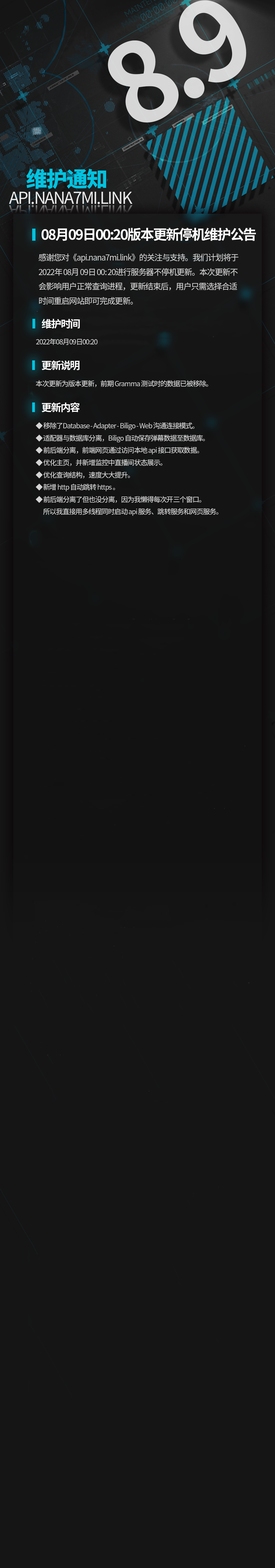
<style>
.page{position:relative;width:275px;height:1568px;background:#151515}
.page>*{position:absolute;margin:0}
.t1{font:110px "SourceHanSansSC-Bold";letter-spacing:-0.075em;color:#d7d7d7}
.t2{font:13.9px "SourceHanSansSC-Bold";letter-spacing:-0.075em;color:#fefefe}
.t3{font:8.3px "SourceHanSansSC-Regular";letter-spacing:-0.075em;color:#d4d4d4}
.t4{font:10.3px "SourceHanSansSC-Bold";letter-spacing:-0.075em;color:#fefefe}
.t5{font:7px "SourceHanSansSC-Regular";letter-spacing:-0.075em;color:#d4d4d4}
</style>
<div class="page">
<p class="t1" style="left:108px;top:0px;width:138px;height:123px;rotate:-30deg">8.9</p>
<p class="t2" style="left:42px;top:227px;width:214px;height:14px">08月09日00:20版本更新停机维护公告</p>
<p class="t3" style="left:39px;top:253px;width:200px;height:52px">感谢您对《api.nana7mi.link》的关注与支持。我们计划将于<br>2022年 08月 09日 00: 20进行服务器不停机更新。本次更新不<br>会影响用户正常查询进程，更新结束后，用户只需选择合适<br>时间重启网站即可完成更新。</p>
<p class="t4" style="left:42px;top:319px;width:38px;height:10px">维护时间</p>
<p class="t5" style="left:36px;top:338px;width:62px;height:7px">2022年08月09日00:20</p>
<p class="t4" style="left:42px;top:360px;width:38px;height:10px">更新说明</p>
<p class="t5" style="left:36px;top:380px;width:172px;height:7px">本次更新为版本更新，前期 Gramma 测试时的数据已被移除。</p>
<p class="t4" style="left:42px;top:402px;width:38px;height:10px">更新内容</p>
<p class="t5" style="left:36px;top:422px;width:182px;height:94px">◆ 移除了Database - Adapter - Biligo - Web 沟通连接模式。<br>◆ 适配器与数据库分离，Biligo 自动保存弹幕数据至数据库。<br>◆ 前后端分离，前端网页通过访问本地 api 接口获取数据。<br>◆ 优化主页，并新增监控中直播间状态展示。<br>◆ 优化查询结构，速度大大提升。<br>◆ 新增 http 自动跳转 https 。<br>◆ 前后端分离了但也没分离，因为我懒得每次开三个窗口。<br>       所以我直接用多线程同时启动 api 服务、跳转服务和网页服务。</p>
</div>
